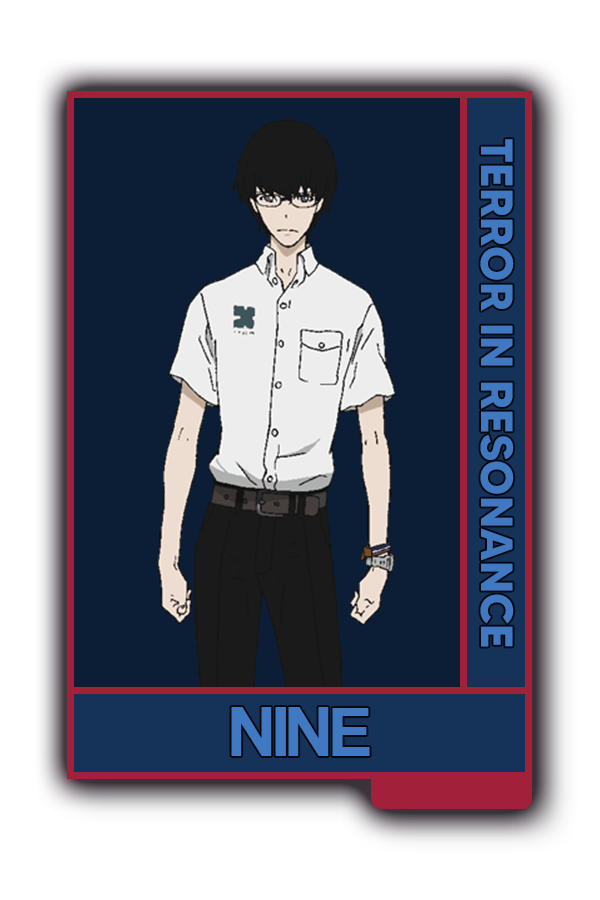
<style>
.page{position:relative;width:600px;height:900px;background:#0c1e35}
.page>*{position:absolute;margin:0}
.t1{font:45.2px "MADETOMMY-Bold";color:#4079c2}
.t2{font:73.3px "CoolveticaRg-Regular";color:#4079c2}
</style>
<div class="page">
<p class="t1" style="left:480px;top:139px;width:34px;height:508px;rotate:90deg">TERROR IN RESONANCE</p>
<p class="t2" style="left:231px;top:707px;width:139px;height:49px">NINE</p>
</div>
